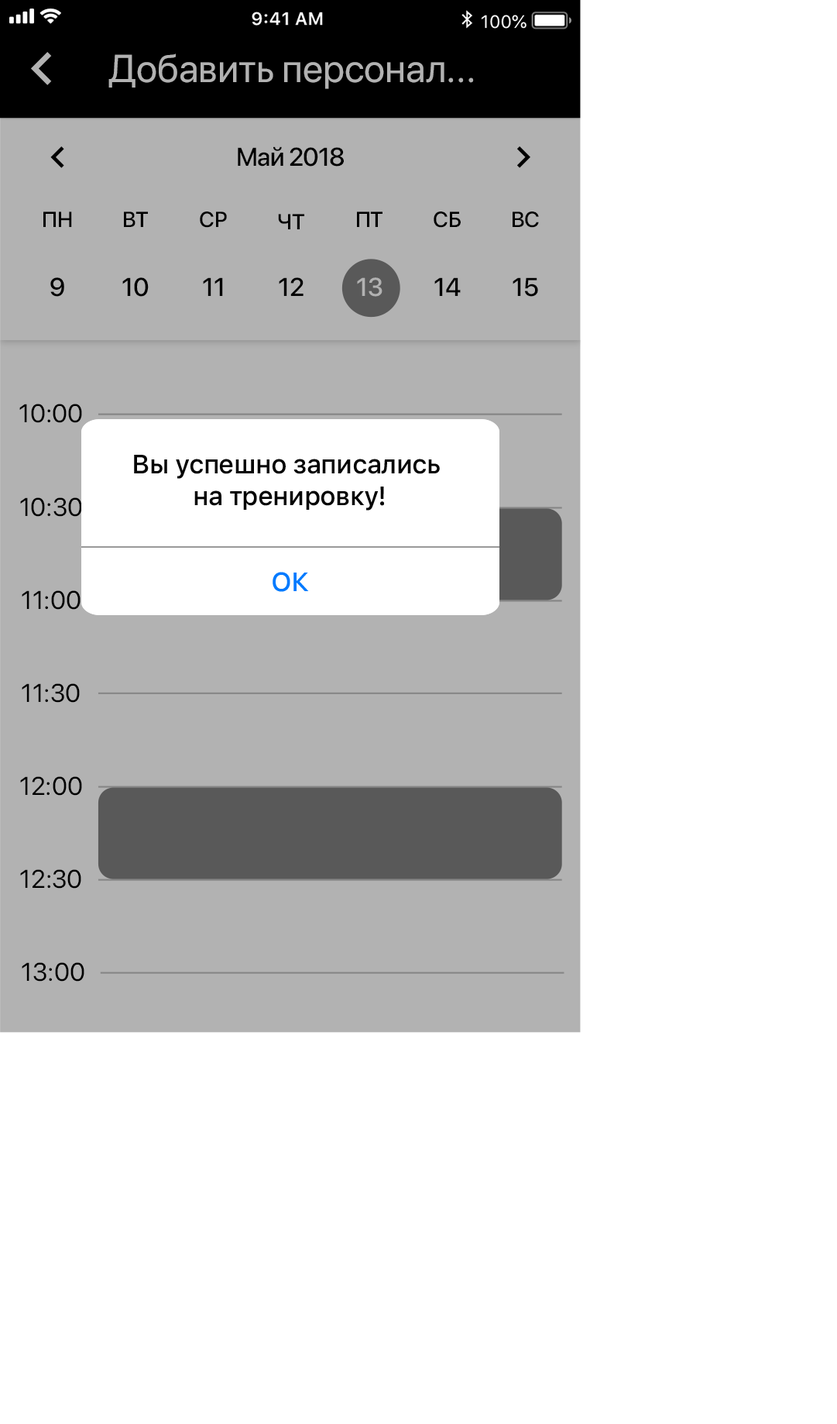
<style>
.page{position:relative;width:837px;height:1424px;background:#ffffff}
.page>*{position:absolute;margin:0}
.t1{font:38.7px "SFProDisplay-Regular";color:#b2b2b2}
.t2{font:25.6px "SFProDisplay-Medium";letter-spacing:-0.023em;color:#000000}
.t3{font:21.7px "SFProDisplay-Medium";color:#000000}
.t4{font:25.6px "SFProDisplay-Medium";color:#000000}
.t5{font:25.6px "SFProDisplay-Medium";color:#b2b2b2}
.t6{font:25.6px "SFProDisplay-Regular";color:#000000}
.t7{font:26.3px "SFProText-Medium";letter-spacing:-0.024em;color:#030303}
.t8{font:26.3px "SFProText-Medium";letter-spacing:-0.024em;color:#007aff}
</style>
<div class="page">
<p class="t1" style="left:108px;top:53px;width:366px;height:36px">Добавить персонал...</p>
<p class="t2" style="left:238px;top:146px;width:106px;height:21px">Май 2018</p>
<p class="t3" style="left:43px;top:211px;width:29px;height:16px">ПН</p>
<p class="t3" style="left:124px;top:211px;width:24px;height:16px">ВТ</p>
<p class="t3" style="left:200px;top:211px;width:27px;height:17px">СР</p>
<p class="t3" style="left:278px;top:214px;width:26px;height:15px">ЧТ</p>
<p class="t3" style="left:357px;top:211px;width:26px;height:16px">ПТ</p>
<p class="t3" style="left:434px;top:211px;width:27px;height:17px">СБ</p>
<p class="t3" style="left:513px;top:211px;width:26px;height:17px">ВС</p>
<p class="t4" style="left:50px;top:277px;width:14px;height:20px">9</p>
<p class="t4" style="left:122px;top:277px;width:27px;height:20px">10</p>
<p class="t4" style="left:203px;top:277px;width:20px;height:19px">11</p>
<p class="t4" style="left:279px;top:277px;width:25px;height:19px">12</p>
<p class="t5" style="left:357px;top:277px;width:26px;height:20px">13</p>
<p class="t4" style="left:435px;top:277px;width:26px;height:19px">14</p>
<p class="t4" style="left:513px;top:277px;width:25px;height:20px">15</p>
<p class="t6" style="left:19px;top:404px;width:63px;height:19px">10:00</p>
<p class="t7" style="left:134px;top:455px;width:306px;height:56px;text-align:center">Вы успешно записались <br>на тренировку!</p>
<p class="t6" style="left:20px;top:497px;width:62px;height:20px">10:30</p>
<p class="t8" style="left:273px;top:572px;width:36px;height:20px">ОК</p>
<p class="t6" style="left:22px;top:590px;width:59px;height:20px">11:00</p>
<p class="t6" style="left:22px;top:683px;width:58px;height:20px">11:30</p>
<p class="t6" style="left:20px;top:776px;width:62px;height:20px">12:00</p>
<p class="t6" style="left:20px;top:869px;width:61px;height:20px">12:30</p>
<p class="t6" style="left:22px;top:962px;width:62px;height:20px">13:00</p>
</div>
